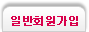
<style>
.page{position:relative;width:89px;height:32px}
.page>*{position:absolute;margin:0}
.t1{font:11px "Dotum";letter-spacing:-0.05em;color:#d9004b;font-weight:bold}
</style>
<div class="page">
<p class="t1" style="left:11px;top:16px;width:67px;height:10px">일반회원가입</p>
</div>
